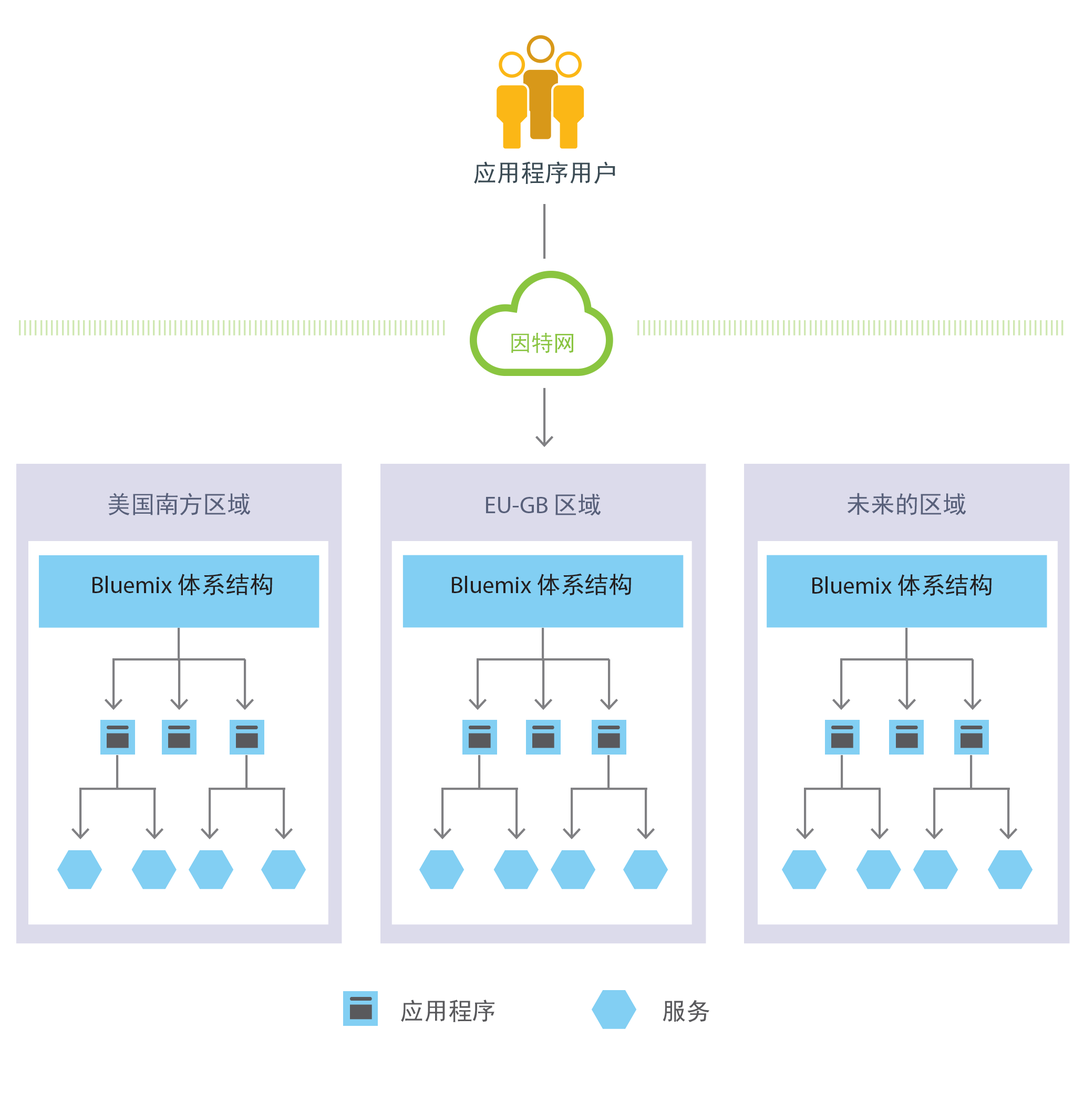
<style>
.page{position:relative;width:1084px;height:1100px;background:#ffffff}
.page>*{position:absolute;margin:0}
.t1{font:24.1px "SimHei";color:#3b4b54}
.t2{font:21.9px "SimHei";color:#8ac540}
.t3{font:24.1px "SimHei";color:#58607a}
.t4{font:24.1px "MyriadPro-Regular";color:#58607a}
.t5{font:24.1px "MyriadPro-Regular";color:#231f20}
.t6{font:24.1px "SimHei";color:#231f20}
.t7{font:24.1px "SimHei";color:#59595c}
</style>
<div class="page">
<p class="t1" style="left:474px;top:161px;width:142px;height:23px">应用程序用户</p>
<p class="t2" style="left:511px;top:333px;width:63px;height:20px">因特网</p>
<p class="t3" style="left:108px;top:493px;width:143px;height:22px">美国南方区域</p>
<p class="t4" style="left:486px;top:494px;width:115px;height:22px">EU-GB <span class="t3">区域</span></p>
<p class="t3" style="left:847px;top:493px;width:120px;height:22px">未来的区域</p>
<p class="t5" style="left:93px;top:573px;width:179px;height:23px">Bluemix <span class="t6">体系结构</span></p>
<p class="t5" style="left:452px;top:573px;width:179px;height:23px">Bluemix <span class="t6">体系结构</span></p>
<p class="t5" style="left:813px;top:573px;width:179px;height:23px">Bluemix <span class="t6">体系结构</span></p>
<p class="t7" style="left:401px;top:999px;width:94px;height:23px">应用程序</p>
<p class="t7" style="left:663px;top:999px;width:47px;height:23px">服务</p>
</div>
